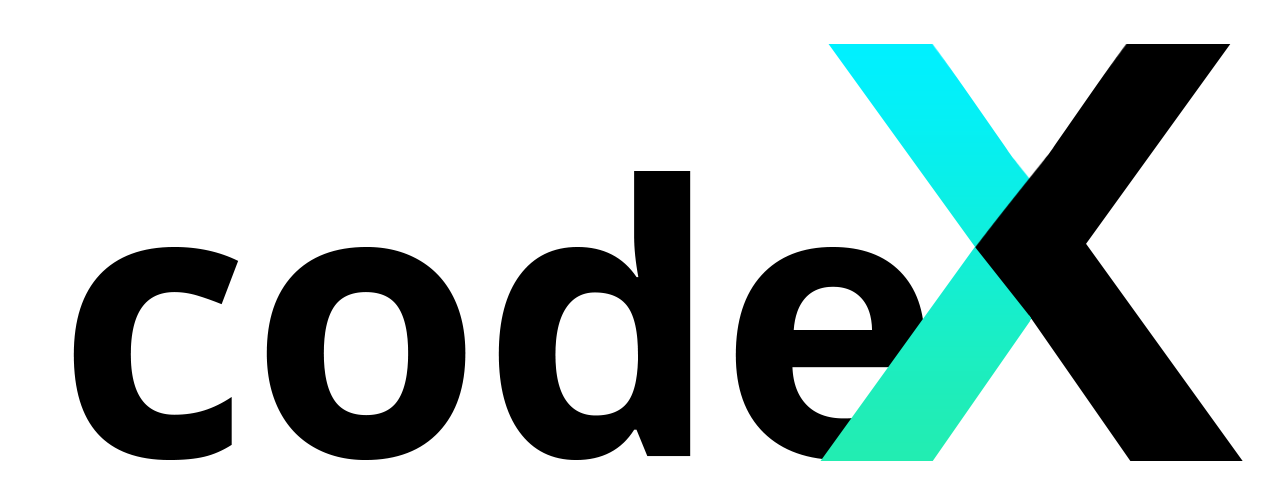
<style>
.page{position:relative;width:1268px;height:502px;background:#ffffff}
.page>*{position:absolute;margin:0}
.t1{font:375px "NotoSans-Bold";color:#000000}
</style>
<div class="page">
<p class="t1" style="left:73px;top:171px;width:852px;height:289px">code</p>
</div>
